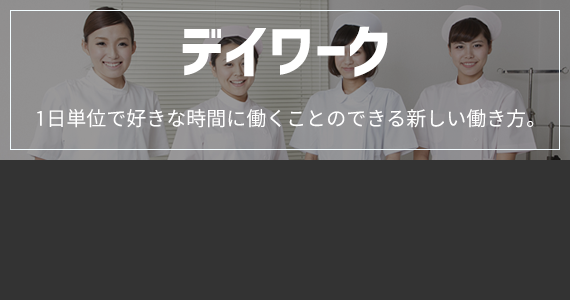
<style>
.page{position:relative;width:570px;height:300px;background:#333333}
.page>*{position:absolute;margin:0}
.t1{font:60px "Corporate-Logo-Bold";color:#ffffff}
.t2{font:20px "Nasu-Regular";color:#ffffff}
</style>
<div class="page">
<p class="t1" style="left:182px;top:26px;width:206px;height:51px">デイワーク</p>
<p class="t2" style="left:37px;top:109px;width:497px;height:19px">1日単位で好きな時間に働くことのできる新しい働き方。</p>
</div>
